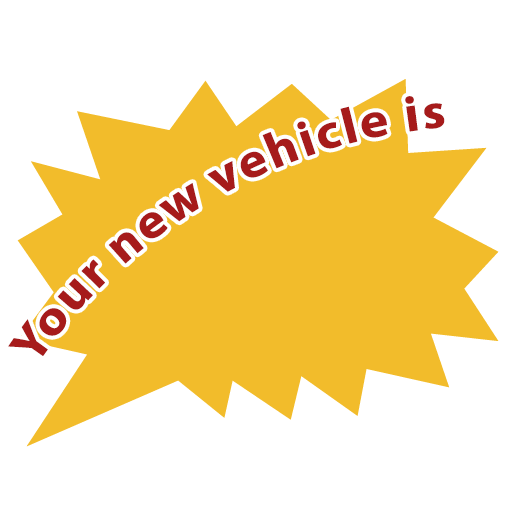
<style>
.page{position:relative;width:512px;height:512px;background:#ffffff}
.page>*{position:absolute;margin:0}
.t1{font:50px "MyriadPro-Bold";letter-spacing:0.05em;color:#a61b1b}
</style>
<div class="page">
<p class="t1" style="left:8px;top:96px;width:437px;height:260px;rotate:-30deg">Your new vehicle is</p>
</div>
